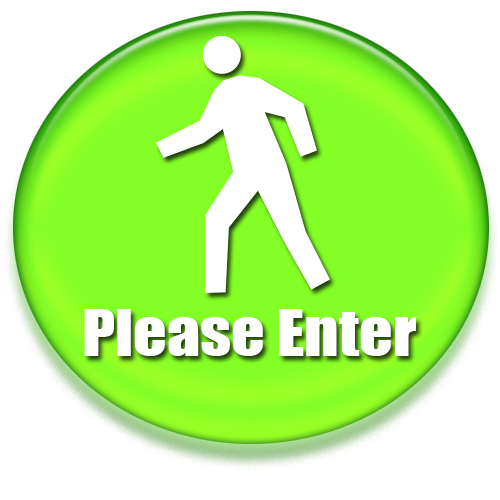
<style>
.page{position:relative;width:500px;height:500px;background:#ffffff}
.page>*{position:absolute;margin:0}
.t1{font:60px "Impact";color:#ffffff;scale:1.1 1}
</style>
<div class="page">
<p class="t1" style="left:84px;top:309px;width:332px;height:47px">Please Enter</p>
</div>
